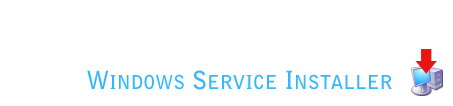
<style>
.page{position:relative;width:453px;height:106px;background:#ffffff}
.page>*{position:absolute;margin:0}
.t1{font:19.2px "BellGothicStd-Bold";color:#36b6fd}
.t2{font:24.7px "BellGothicStd-Bold";color:#36b6fd}
</style>
<div class="page">
<p class="t1" style="left:87px;top:70px;width:305px;height:20px"><span class="t2">W</span>INDOWS<span class="t2"> S</span>ERVICE<span class="t2"> I</span>NSTALLER</p>
</div>
